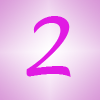
<style>
.page{position:relative;width:100px;height:100px}
.page>*{position:absolute;margin:0}
.t1{font:83.3px "LucidaHandwriting-Italic";color:#e11ae3}
</style>
<div class="page">
<p class="t1" style="left:26px;top:16px;width:45px;height:61px">2</p>
</div>
